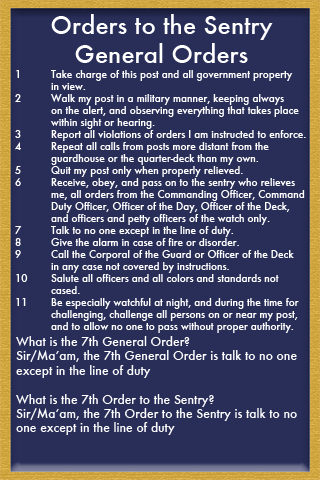
<style>
.page{position:relative;width:320px;height:480px;background:#292e59}
.page>*{position:absolute;margin:0}
.t1{font:24px "Futura-Medium";color:#ffffff}
.t2{font:10px "Futura-Medium";color:#ffffff}
.t3{font:12px "Futura-Medium";color:#ffffff}
</style>
<div class="page">
<p class="t1" style="left:51px;top:14px;width:222px;height:49px;text-align:center">Orders to the Sentry<br>General Orders</p>
<p class="t2" style="left:15px;top:70px;width:291px;height:263px">1 Take charge of this post and all government property <br> in view. <br>2 Walk my post in a military manner, keeping always <br> on the alert, and observing everything that takes place <br> within sight or hearing. <br>3 Report all violations of orders I am instructed to enforce. <br>4 Repeat all calls from posts more distant from the <br> guardhouse or the quarter-deck than my own.<br>5 Quit my post only when properly relieved. <br>6 Receive, obey, and pass on to the sentry who relieves <br> me, all orders from the Commanding Officer, Command <br> Duty Officer, Officer of the Day, Officer of the Deck, <br> and officers and petty officers of the watch only.<br>7 Talk to no one except in the line of duty. <br>8 Give the alarm in case of fire or disorder. <br>9 Call the Corporal of the Guard or Officer of the Deck <br> in any case not covered by instructions. <br>10 Salute all officers and all colors and standards not <br> cased. <br>11 Be especially watchful at night, and during the time for <br> challenging, challenge all persons on or near my post, <br> and to allow no one to pass without proper authority.</p>
<p class="t3" style="left:16px;top:336px;width:281px;height:99px">What is the 7th General Order?<br>Sir/Ma’am, the 7th General Order is talk to no one <br>except in the line of duty<br><br>What is the 7th Order to the Sentry?<br>Sir/Ma’am, the 7th Order to the Sentry is talk to no <br>one except in the line of duty</p>
</div>
